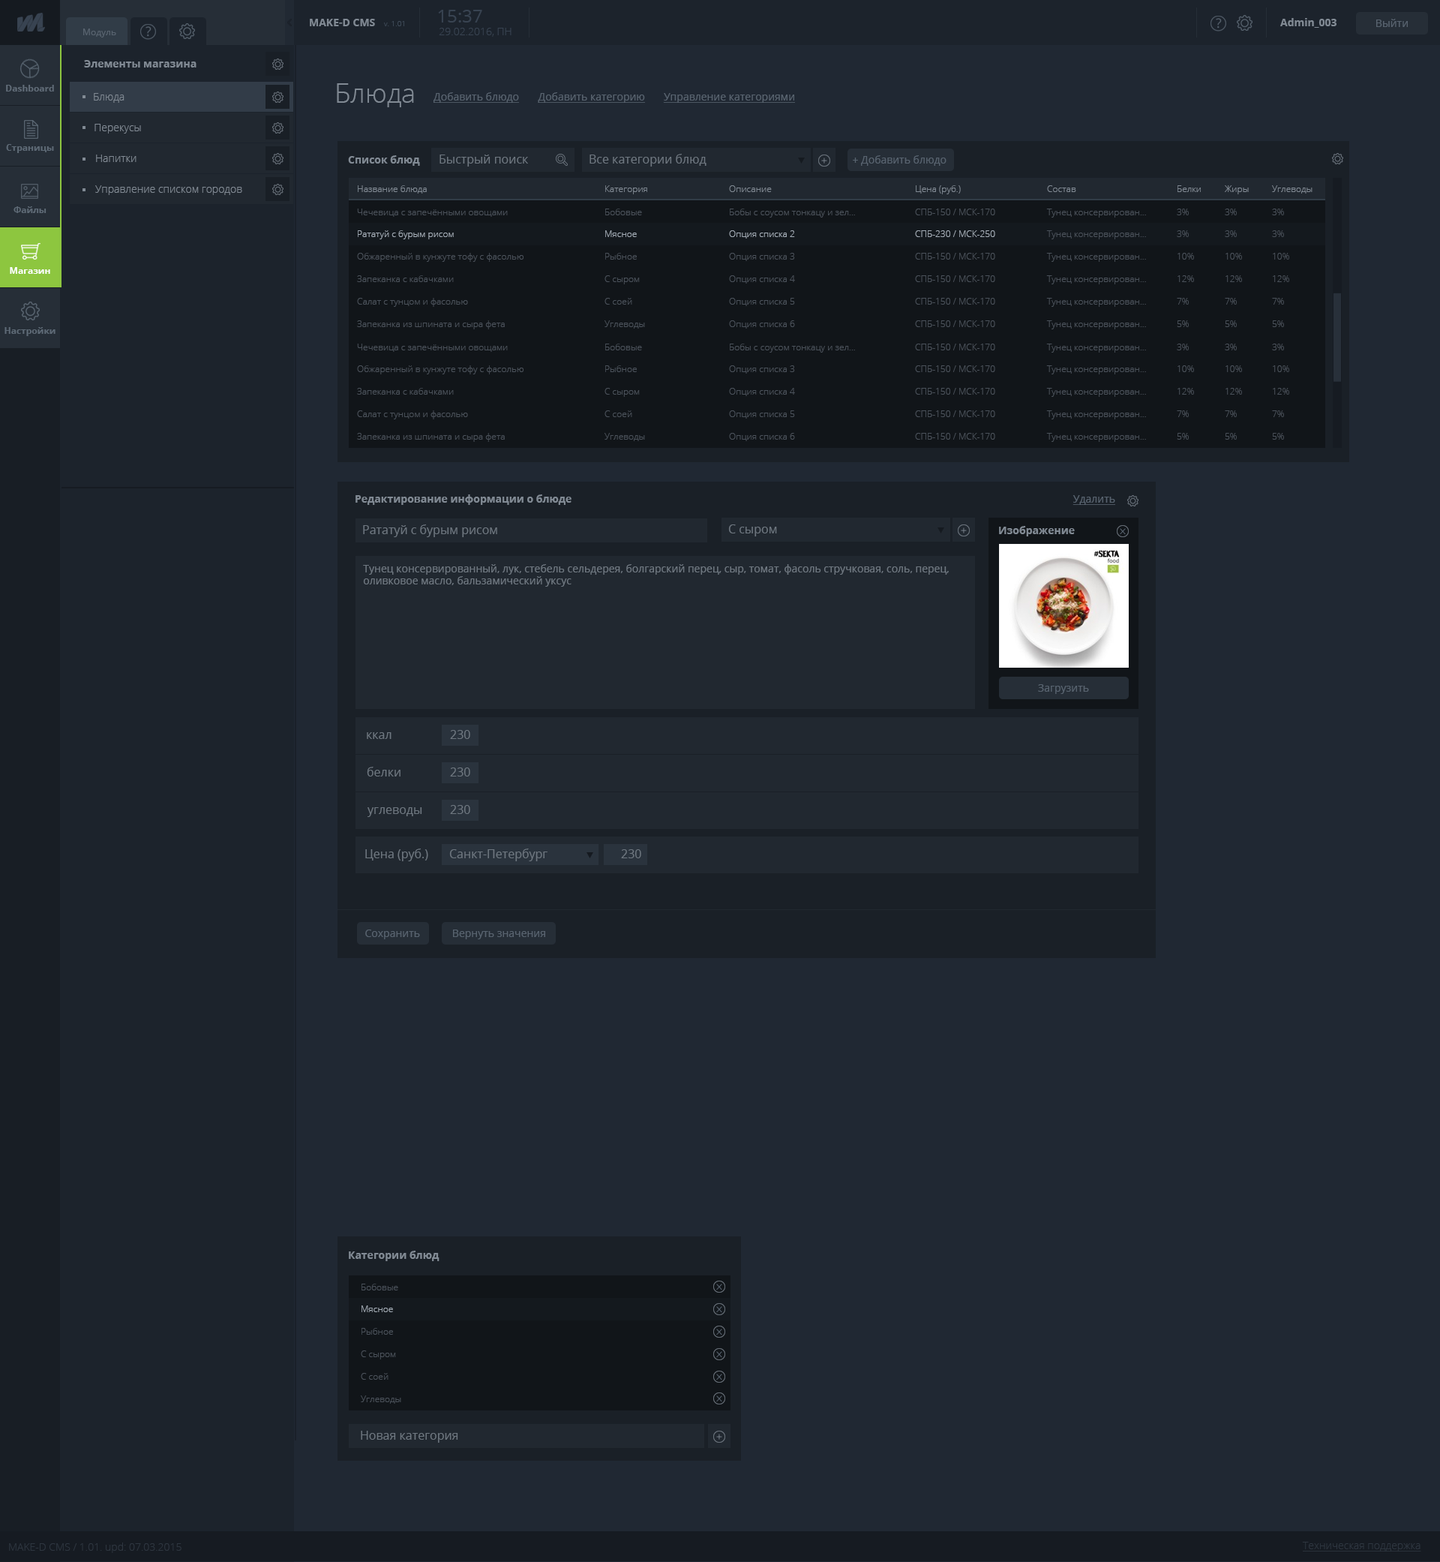
<style>
.page{position:relative;width:1440px;height:1562px;background:#202833}
.page>*{position:absolute;margin:0}
.t1{font:18px "OpenSans";color:#384351}
.t2{font:9px "OpenSans";color:#58636f}
.t3{font:10.5px "OpenSans-Bold";color:#818a94}
.t4{font:7.5px "OpenSans-Light";color:#3e4a58}
.t5{font:10.5px "OpenSans-Light";color:#384351}
.t6{font:10.5px "OpenSans";color:#58636f}
.t7{font:9px "OpenSans-Bold";color:#606b77}
.t8{font:27px "OpenSans-Light";color:#818a94}
.t9{font:10.5px "OpenSans-Light";color:#818a94}
.t10{font:10.5px "OpenSans";color:#58636f;text-decoration:underline}
.t11{font:9px "OpenSans-Bold";color:#5e6a76}
.t12{font:12px "OpenSans";color:#6e7780}
.t13{font:9px "OpenSans-Light";color:#818a94}
.t14{font:9px "OpenSans-Light";color:#4b525b}
.t15{font:9px "OpenSans-Light";color:#a5aeb8}
.t16{font:9px "OpenSans-Bold";color:#ffffff}
.t17{font:10.5px "OpenSans";color:#6e7780}
.t18{font:10.5px "OpenSans-Light";color:#2e3640}
.t19{font:10.5px "OpenSans-Light";color:#2e3640;text-decoration:underline}
</style>
<div class="page">
<p class="t1" style="left:438px;top:10px;width:44px;height:12px">15:37</p>
<p class="t2" style="left:83px;top:28px;width:33px;height:10px">Модуль</p>
<p class="t3" style="left:310px;top:19px;width:65px;height:7px">MAKE-D CMS</p>
<p class="t4" style="left:384px;top:21px;width:20px;height:5px">v. 1.01</p>
<p class="t5" style="left:439px;top:28px;width:73px;height:9px">29.02.2016, ПН</p>
<p class="t3" style="left:1280px;top:18px;width:56px;height:10px">Admin_003</p>
<p class="t6" style="left:1376px;top:19px;width:32px;height:8px">Выйти</p>
<p class="t3" style="left:84px;top:60px;width:112px;height:8px">Элементы магазина</p>
<p class="t7" style="left:6px;top:85px;width:48px;height:7px">Dashboard</p>
<p class="t8" style="left:337px;top:83px;width:77px;height:24px">Блюда</p>
<p class="t9" style="left:94px;top:93px;width:30px;height:10px">Блюда</p>
<p class="t10" style="left:434px;top:92px;width:85px;height:11px">Добавить блюдо</p>
<p class="t10" style="left:538px;top:92px;width:107px;height:11px">Добавить категорию</p>
<p class="t10" style="left:663px;top:93px;width:132px;height:10px">Управление категориями</p>
<p class="t9" style="left:94px;top:124px;width:47px;height:10px">Перекусы</p>
<p class="t11" style="left:6px;top:144px;width:48px;height:9px">Страницы</p>
<p class="t9" style="left:96px;top:154px;width:40px;height:8px">Напитки</p>
<p class="t3" style="left:348px;top:155px;width:72px;height:11px">Список блюд</p>
<p class="t12" style="left:440px;top:154px;width:88px;height:12px">Быстрый поиск</p>
<p class="t12" style="left:590px;top:154px;width:116px;height:12px">Все категории блюд</p>
<p class="t6" style="left:853px;top:155px;width:93px;height:11px">+ Добавить блюдо</p>
<p class="t9" style="left:95px;top:185px;width:147px;height:10px">Управление списком городов</p>
<p class="t13" style="left:358px;top:185px;width:69px;height:9px">Название блюда</p>
<p class="t13" style="left:605px;top:185px;width:42px;height:9px">Категория</p>
<p class="t13" style="left:729px;top:185px;width:43px;height:7px">Описание</p>
<p class="t13" style="left:916px;top:185px;width:45px;height:9px">Цена (руб.)</p>
<p class="t13" style="left:1047px;top:185px;width:29px;height:7px">Состав</p>
<p class="t13" style="left:1178px;top:185px;width:23px;height:7px">Белки</p>
<p class="t13" style="left:1225px;top:185px;width:24px;height:9px">Жиры</p>
<p class="t13" style="left:1272px;top:185px;width:40px;height:9px">Углеводы</p>
<p class="t11" style="left:14px;top:206px;width:32px;height:7px">Файлы</p>
<p class="t14" style="left:357px;top:208px;width:151px;height:9px">Чечевица с запечёнными овощами</p>
<p class="t14" style="left:605px;top:208px;width:37px;height:7px">Бобовые</p>
<p class="t14" style="left:730px;top:208px;width:125px;height:10px">Бобы с соусом тонкацу и зел...</p>
<p class="t14" style="left:915px;top:208px;width:80px;height:7px">СПБ-150 / МСК-170</p>
<p class="t14" style="left:1046px;top:208px;width:100px;height:10px">Тунец консервирован...</p>
<p class="t14" style="left:1177px;top:208px;width:12px;height:7px">3%</p>
<p class="t14" style="left:1225px;top:208px;width:12px;height:7px">3%</p>
<p class="t14" style="left:1272px;top:208px;width:12px;height:7px">3%</p>
<p class="t15" style="left:358px;top:230px;width:96px;height:9px">Рататуй с бурым рисом</p>
<p class="t15" style="left:605px;top:230px;width:32px;height:7px">Мясное</p>
<p class="t15" style="left:729px;top:230px;width:66px;height:8px">Опция списка 2</p>
<p class="t15" style="left:915px;top:230px;width:80px;height:7px">СПБ-230 / МСК-250</p>
<p class="t14" style="left:1046px;top:230px;width:100px;height:9px">Тунец консервирован...</p>
<p class="t14" style="left:1177px;top:230px;width:12px;height:7px">3%</p>
<p class="t14" style="left:1225px;top:230px;width:12px;height:7px">3%</p>
<p class="t14" style="left:1272px;top:230px;width:12px;height:7px">3%</p>
<p class="t14" style="left:357px;top:253px;width:167px;height:9px">Обжаренный в кунжуте тофу с фасолью</p>
<p class="t14" style="left:605px;top:253px;width:32px;height:7px">Рыбное</p>
<p class="t14" style="left:729px;top:253px;width:66px;height:8px">Опция списка 3</p>
<p class="t14" style="left:915px;top:253px;width:80px;height:7px">СПБ-150 / МСК-170</p>
<p class="t14" style="left:1046px;top:253px;width:100px;height:9px">Тунец консервирован...</p>
<p class="t14" style="left:1178px;top:253px;width:16px;height:7px">10%</p>
<p class="t14" style="left:1226px;top:253px;width:16px;height:7px">10%</p>
<p class="t14" style="left:1273px;top:253px;width:16px;height:7px">10%</p>
<p class="t16" style="left:10px;top:267px;width:40px;height:7px">Магазин</p>
<p class="t14" style="left:357px;top:275px;width:97px;height:7px">Запеканка с кабачками</p>
<p class="t14" style="left:604px;top:275px;width:36px;height:9px">С сыром</p>
<p class="t14" style="left:729px;top:275px;width:66px;height:9px">Опция списка 4</p>
<p class="t14" style="left:915px;top:275px;width:80px;height:7px">СПБ-150 / МСК-170</p>
<p class="t14" style="left:1046px;top:275px;width:100px;height:9px">Тунец консервирован...</p>
<p class="t14" style="left:1178px;top:275px;width:16px;height:7px">12%</p>
<p class="t14" style="left:1226px;top:275px;width:16px;height:7px">12%</p>
<p class="t14" style="left:1273px;top:275px;width:16px;height:7px">12%</p>
<p class="t14" style="left:357px;top:298px;width:111px;height:9px">Салат с тунцом и фасолью</p>
<p class="t14" style="left:604px;top:298px;width:28px;height:6px">С соей</p>
<p class="t14" style="left:729px;top:298px;width:66px;height:8px">Опция списка 5</p>
<p class="t14" style="left:915px;top:298px;width:80px;height:6px">СПБ-150 / МСК-170</p>
<p class="t14" style="left:1046px;top:298px;width:100px;height:9px">Тунец консервирован...</p>
<p class="t14" style="left:1177px;top:298px;width:12px;height:6px">7%</p>
<p class="t14" style="left:1225px;top:298px;width:12px;height:6px">7%</p>
<p class="t14" style="left:1272px;top:298px;width:12px;height:6px">7%</p>
<p class="t11" style="left:4px;top:327px;width:52px;height:9px">Настройки</p>
<p class="t14" style="left:357px;top:320px;width:148px;height:9px">Запеканка из шпината и сыра фета</p>
<p class="t14" style="left:604px;top:320px;width:41px;height:8px">Углеводы</p>
<p class="t14" style="left:729px;top:320px;width:66px;height:8px">Опция списка 6</p>
<p class="t14" style="left:915px;top:320px;width:80px;height:7px">СПБ-150 / МСК-170</p>
<p class="t14" style="left:1046px;top:320px;width:100px;height:9px">Тунец консервирован...</p>
<p class="t14" style="left:1177px;top:320px;width:12px;height:7px">5%</p>
<p class="t14" style="left:1225px;top:320px;width:12px;height:7px">5%</p>
<p class="t14" style="left:1272px;top:320px;width:12px;height:7px">5%</p>
<p class="t14" style="left:357px;top:344px;width:151px;height:8px">Чечевица с запечёнными овощами</p>
<p class="t14" style="left:605px;top:344px;width:37px;height:6px">Бобовые</p>
<p class="t14" style="left:730px;top:344px;width:125px;height:8px">Бобы с соусом тонкацу и зел...</p>
<p class="t14" style="left:915px;top:344px;width:80px;height:6px">СПБ-150 / МСК-170</p>
<p class="t14" style="left:1046px;top:344px;width:100px;height:8px">Тунец консервирован...</p>
<p class="t14" style="left:1177px;top:344px;width:12px;height:6px">3%</p>
<p class="t14" style="left:1225px;top:344px;width:12px;height:6px">3%</p>
<p class="t14" style="left:1272px;top:344px;width:12px;height:6px">3%</p>
<p class="t14" style="left:357px;top:365px;width:167px;height:9px">Обжаренный в кунжуте тофу с фасолью</p>
<p class="t14" style="left:605px;top:365px;width:32px;height:7px">Рыбное</p>
<p class="t14" style="left:729px;top:365px;width:66px;height:9px">Опция списка 3</p>
<p class="t14" style="left:915px;top:365px;width:80px;height:7px">СПБ-150 / МСК-170</p>
<p class="t14" style="left:1046px;top:365px;width:100px;height:9px">Тунец консервирован...</p>
<p class="t14" style="left:1178px;top:365px;width:16px;height:7px">10%</p>
<p class="t14" style="left:1226px;top:365px;width:16px;height:7px">10%</p>
<p class="t14" style="left:1273px;top:365px;width:16px;height:7px">10%</p>
<p class="t14" style="left:357px;top:388px;width:97px;height:6px">Запеканка с кабачками</p>
<p class="t14" style="left:604px;top:388px;width:36px;height:9px">С сыром</p>
<p class="t14" style="left:729px;top:388px;width:66px;height:8px">Опция списка 4</p>
<p class="t14" style="left:915px;top:388px;width:80px;height:6px">СПБ-150 / МСК-170</p>
<p class="t14" style="left:1046px;top:388px;width:100px;height:9px">Тунец консервирован...</p>
<p class="t14" style="left:1178px;top:388px;width:16px;height:6px">12%</p>
<p class="t14" style="left:1226px;top:388px;width:16px;height:6px">12%</p>
<p class="t14" style="left:1273px;top:388px;width:16px;height:6px">12%</p>
<p class="t14" style="left:357px;top:410px;width:111px;height:9px">Салат с тунцом и фасолью</p>
<p class="t14" style="left:604px;top:410px;width:28px;height:7px">С соей</p>
<p class="t14" style="left:729px;top:410px;width:66px;height:8px">Опция списка 5</p>
<p class="t14" style="left:915px;top:410px;width:80px;height:7px">СПБ-150 / МСК-170</p>
<p class="t14" style="left:1046px;top:410px;width:100px;height:9px">Тунец консервирован...</p>
<p class="t14" style="left:1177px;top:410px;width:12px;height:7px">7%</p>
<p class="t14" style="left:1225px;top:410px;width:12px;height:7px">7%</p>
<p class="t14" style="left:1272px;top:410px;width:12px;height:7px">7%</p>
<p class="t14" style="left:357px;top:433px;width:148px;height:9px">Запеканка из шпината и сыра фета</p>
<p class="t14" style="left:604px;top:433px;width:41px;height:8px">Углеводы</p>
<p class="t14" style="left:729px;top:433px;width:66px;height:8px">Опция списка 6</p>
<p class="t14" style="left:915px;top:433px;width:80px;height:7px">СПБ-150 / МСК-170</p>
<p class="t14" style="left:1046px;top:433px;width:100px;height:9px">Тунец консервирован...</p>
<p class="t14" style="left:1177px;top:433px;width:12px;height:7px">5%</p>
<p class="t14" style="left:1225px;top:433px;width:12px;height:7px">5%</p>
<p class="t14" style="left:1272px;top:433px;width:12px;height:7px">5%</p>
<p class="t3" style="left:356px;top:494px;width:216px;height:11px">Редактирование информации о блюде</p>
<p class="t10" style="left:1072px;top:495px;width:43px;height:10px">Удалить</p>
<p class="t12" style="left:363px;top:524px;width:134px;height:13px">Рататуй с бурым рисом</p>
<p class="t12" style="left:728px;top:524px;width:49px;height:12px">С сыром</p>
<p class="t3" style="left:999px;top:526px;width:76px;height:10px">Изображение</p>
<p class="t17" style="left:363px;top:564px;width:586px;height:22px">Тунец консервированный, лук, стебель сельдерея, болгарский перец, сыр, томат, фасоль стручковая, соль, перец, оливковое масло, бальзамический уксус</p>
<p class="t6" style="left:1038px;top:684px;width:51px;height:10px">Загрузить</p>
<p class="t12" style="left:367px;top:732px;width:25px;height:7px">ккал</p>
<p class="t12" style="left:450px;top:730px;width:20px;height:9px">230</p>
<p class="t12" style="left:367px;top:766px;width:33px;height:10px">белки</p>
<p class="t12" style="left:450px;top:767px;width:20px;height:9px">230</p>
<p class="t12" style="left:368px;top:807px;width:54px;height:10px">углеводы</p>
<p class="t12" style="left:450px;top:805px;width:20px;height:9px">230</p>
<p class="t12" style="left:365px;top:848px;width:63px;height:13px">Цена (руб.)</p>
<p class="t12" style="left:449px;top:848px;width:99px;height:13px">Санкт-Петербург</p>
<p class="t12" style="left:621px;top:849px;width:20px;height:9px">230</p>
<p class="t6" style="left:365px;top:929px;width:55px;height:10px">Сохранить</p>
<p class="t6" style="left:453px;top:929px;width:92px;height:10px">Вернуть значения</p>
<p class="t3" style="left:349px;top:1250px;width:91px;height:11px">Категории блюд</p>
<p class="t14" style="left:362px;top:1283px;width:36px;height:7px">Бобовые</p>
<p class="t15" style="left:362px;top:1305px;width:31px;height:7px">Мясное</p>
<p class="t14" style="left:362px;top:1328px;width:31px;height:6px">Рыбное</p>
<p class="t14" style="left:361px;top:1350px;width:35px;height:9px">С сыром</p>
<p class="t14" style="left:361px;top:1372px;width:27px;height:7px">С соей</p>
<p class="t14" style="left:361px;top:1395px;width:40px;height:8px">Углеводы</p>
<p class="t12" style="left:361px;top:1430px;width:97px;height:12px">Новая категория</p>
<p class="t18" style="left:9px;top:1542px;width:173px;height:10px">MAKE-D CMS / 1.01. upd: 07.03.2015</p>
<p class="t19" style="left:1302px;top:1541px;width:119px;height:10px">Техническая поддержка</p>
</div>
